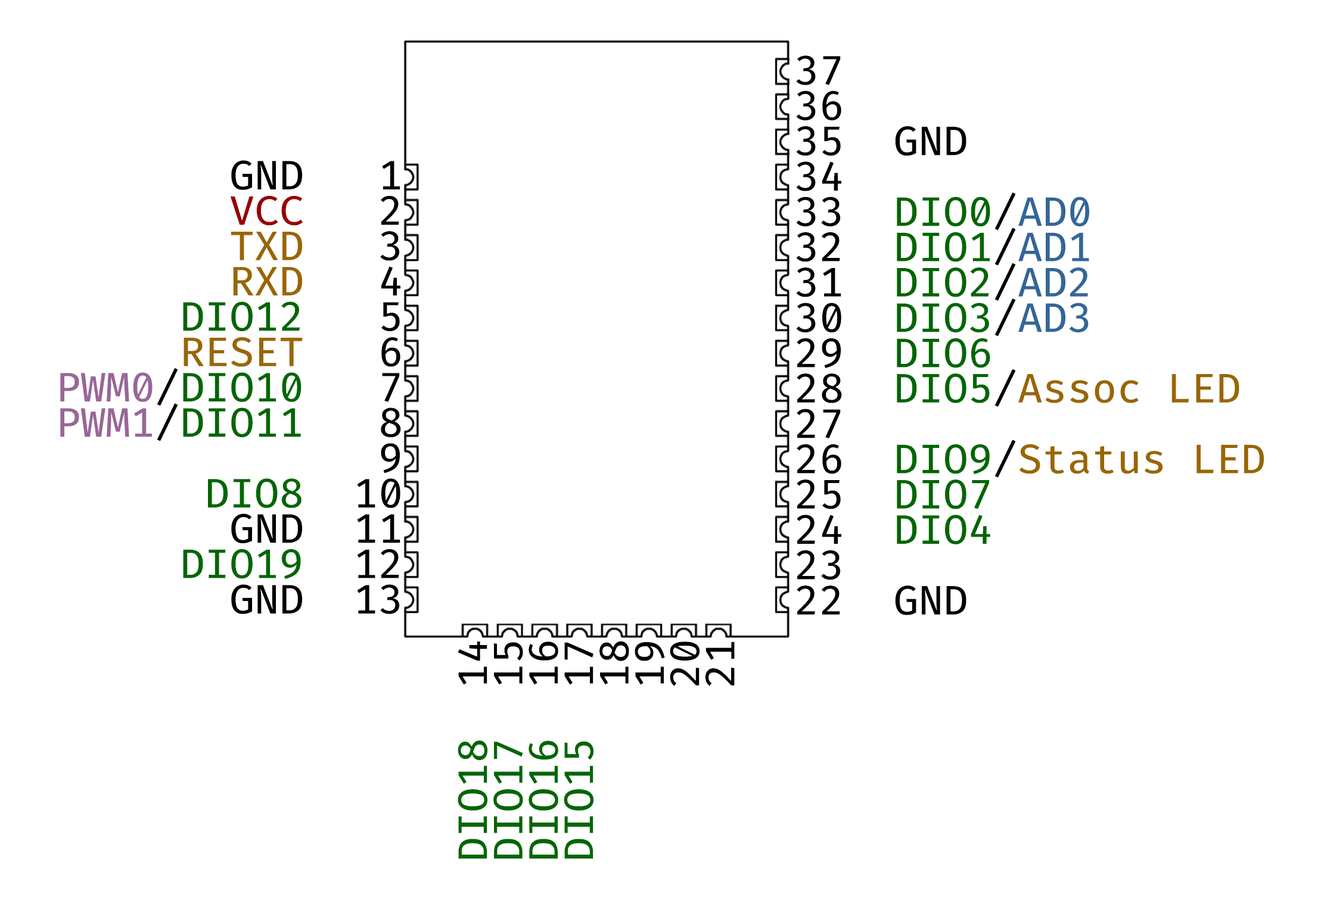
<style>
.page{position:relative;width:1324px;height:900px;background:#ffffff}
.page>*{position:absolute;margin:0}
.t1{font:40.3px/35.4px "FiraCode-Retina";color:#000000}
.t2{font:40.3px/35.4px "FiraCode-Retina";color:#006600}
.t3{font:40.3px/35.4px "FiraCode-Retina";color:#336699}
.t4{font:40.3px/35.4px "FiraCode-Retina";color:#996600}
.t5{font:40.3px/35.4px "FiraCode-Retina";color:#990000}
.t6{font:40.3px/35.4px "FiraCode-Retina";color:#996699}
</style>
<div class="page">
<p class="t1" style="left:796px;top:55px;width:468px;height:561px">37<br>36<br>35  GND<br>34<br>33  <span class="t2">DIO0</span>/<span class="t3">AD0<br></span>32  <span class="t2">DIO1</span>/<span class="t3">AD1<br></span>31  <span class="t2">DIO2</span>/<span class="t3">AD2<br></span>30  <span class="t2">DIO3</span>/<span class="t3">AD3<br></span>29  <span class="t2">DIO6<br></span>28  <span class="t2">DIO5</span>/<span class="t4">Assoc LED<br></span>27<br>26  <span class="t2">DIO9</span>/<span class="t4">Status LED<br></span>25  <span class="t2">DIO7<br></span>24  <span class="t2">DIO4<br></span>23<br>22  GND</p>
<p class="t1" style="left:60px;top:160px;width:341px;height:454px;text-align:right">GND   1<br><span class="t5">VCC</span>   2<br><span class="t4">TXD</span>   3<br><span class="t4">RXD</span>   4<br><span class="t2">DIO12</span>   5<br><span class="t4">RESET</span>   6<br> <span class="t6">PWM0</span>/<span class="t2">DIO10</span>   7<br><span class="t6">PWM1</span>/<span class="t2">DIO11</span>   8<br>9<br><span class="t2">DIO8</span>  10<br>GND  11<br><span class="t2">DIO19</span>  12<br>GND  13</p>
<p class="t1" style="left:458px;top:641px;width:277px;height:218px;text-align:right;rotate:-90deg"><span class="t2">DIO18</span>  14<br><span class="t2">DIO17</span>  15<br><span class="t2">DIO16</span>  16<br><span class="t2">DIO15</span>  17<br>18<br>19<br>20<br>21</p>
</div>
